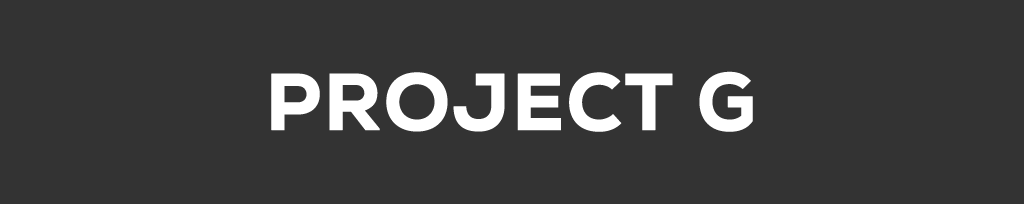
<style>
.page{position:relative;width:1024px;height:204px;background:#333333}
.page>*{position:absolute;margin:0}
.t1{font:80px "NexaHeavy";color:#ffffff;font-weight:bold}
</style>
<div class="page">
<p class="t1" style="left:271px;top:71px;width:482px;height:61px">PROJECT G</p>
</div>
